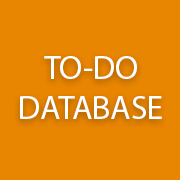
<style>
.page{position:relative;width:180px;height:180px;background:#e88501}
.page>*{position:absolute;margin:0}
.t1{font:12px "MyriadPro-Regular";color:#ffffff}
</style>
<div class="page">
<p class="t1" style="left:20px;top:56px;width:142px;height:63px;text-align:center">TO-DO<br>DATABASE</p>
</div>
